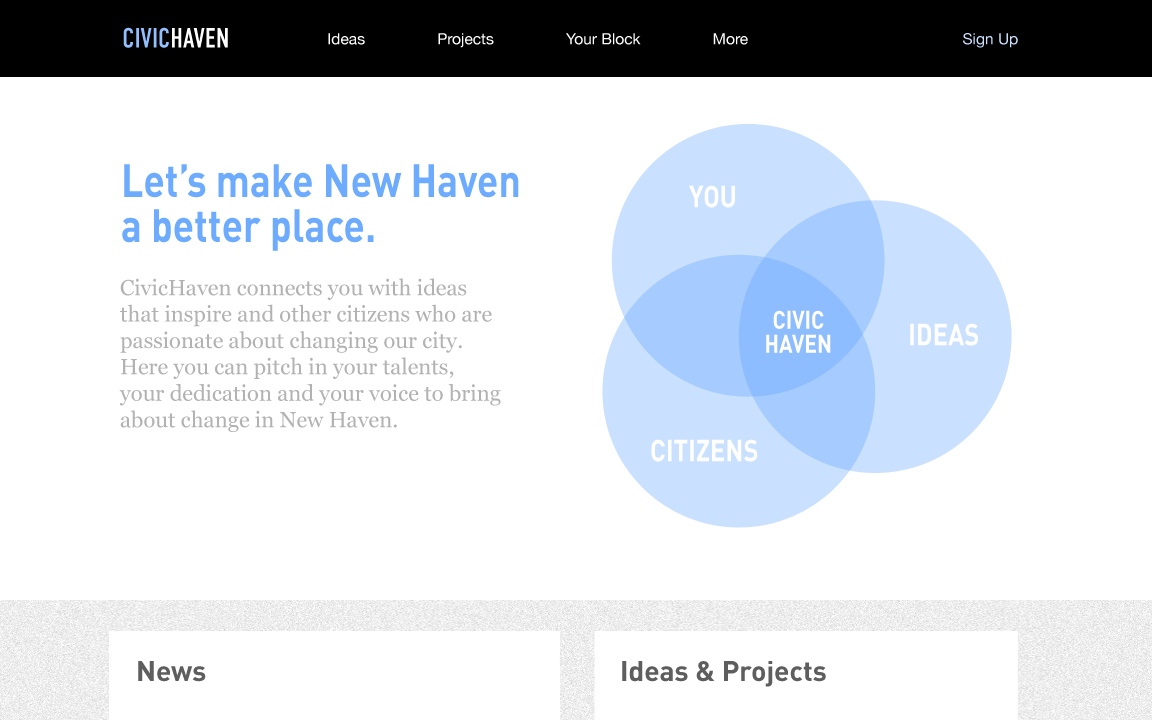
<style>
.page{position:relative;width:1152px;height:720px;background:#ffffff}
.page>*{position:absolute;margin:0}
.t1{font:28px "DINCondensedC";color:#92c0ff}
.t2{font:28px "DINCondensedC";color:#ffffff}
.t3{font:15.5px "HelveticaNeue";color:#fefefe}
.t4{font:15.5px "HelveticaNeue";color:#cae0ff}
.t5{font:46px/45px "DIN-Bold";color:#6dabff;scale:0.85 1}
.t6{font:30px "DIN-Bold";color:#ffffff;scale:0.85 1}
.t7{font:22px "Georgia";color:#b2b2b2}
.t8{font:25px/24px "DIN-Bold";color:#ffffff;scale:0.85 1}
.t9{font:28px "DIN-Bold";color:#5e5e5e}
</style>
<div class="page">
<p class="t1" style="left:123px;top:27px;width:105px;height:21px">CIVIC<span class="t2">HAVEN</span></p>
<p class="t3" style="left:328px;top:33px;width:37px;height:12px">Ideas</p>
<p class="t3" style="left:438px;top:33px;width:56px;height:15px">Projects</p>
<p class="t3" style="left:566px;top:33px;width:75px;height:12px">Your Block</p>
<p class="t3" style="left:713px;top:33px;width:35px;height:12px">More</p>
<p class="t4" style="left:963px;top:33px;width:55px;height:15px">Sign Up</p>
<p class="t5" style="left:122px;top:164px;width:397px;height:87px">Let’s make New Haven <br>a better place.</p>
<p class="t6" style="left:689px;top:185px;width:46px;height:23px">YOU</p>
<p class="t7" style="left:119px;top:278px;width:382px;height:154px">CivicHaven connects you with ideas that inspire and other citizens who are <br>passionate about changing our city. Here you can pitch in your talents, your dedication and your voice to bring about change in New Haven.</p>
<p class="t8" style="left:766px;top:310px;width:65px;height:43px;text-align:center">CIVIC<br>HAVEN</p>
<p class="t6" style="left:910px;top:323px;width:68px;height:23px">IDEAS</p>
<p class="t6" style="left:651px;top:439px;width:107px;height:23px">CITIZENS</p>
<p class="t9" style="left:138px;top:661px;width:68px;height:21px">News</p>
<p class="t9" style="left:622px;top:661px;width:204px;height:26px">Ideas &amp; Projects</p>
</div>
